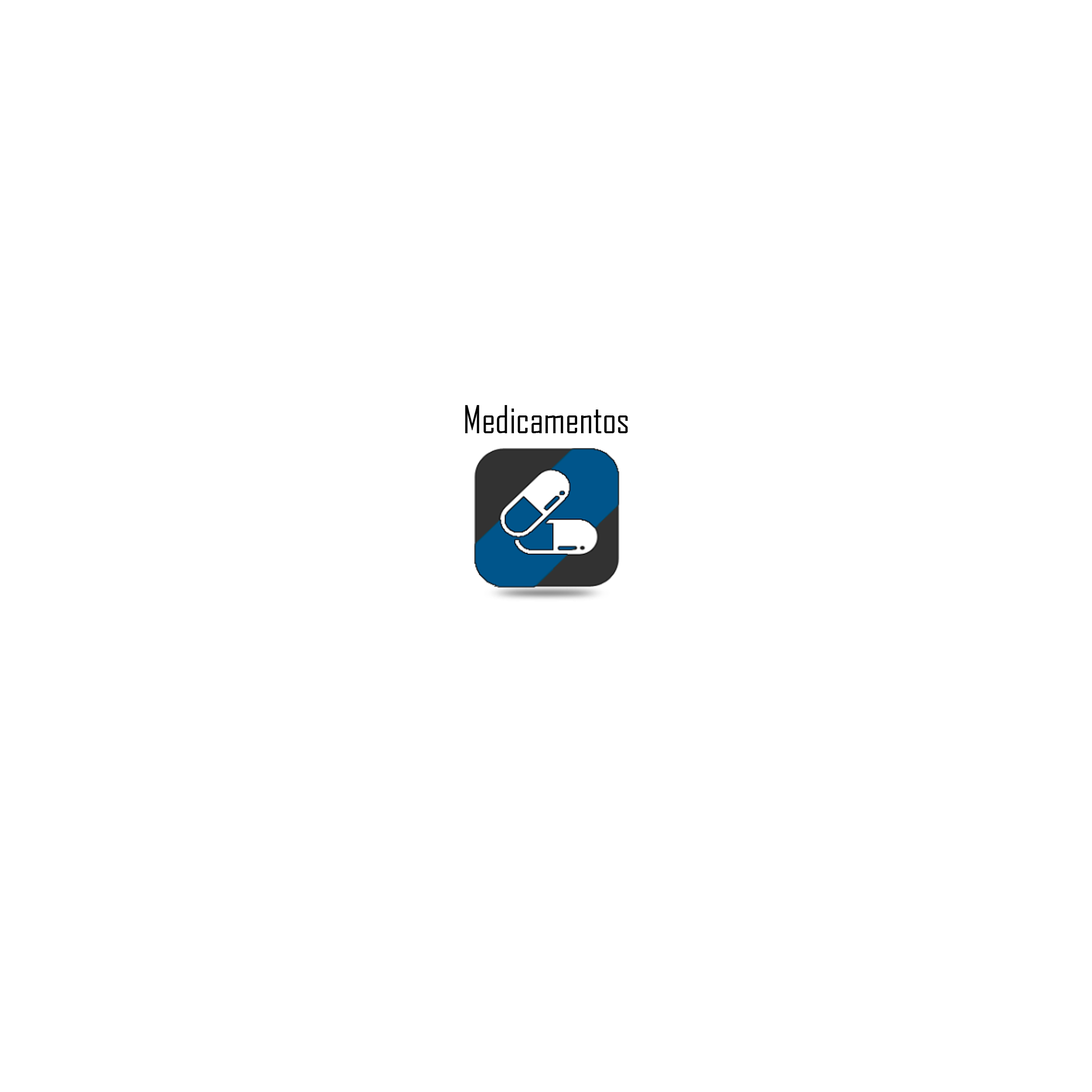
<style>
.page{position:relative;width:1092px;height:1092px;background:#ffffff}
.page>*{position:absolute;margin:0}
.t1{font:37.1px "AgencyFB-Reg";color:#030303}
</style>
<div class="page">
<p class="t1" style="left:465px;top:405px;width:163px;height:28px">Medicamentos</p>
</div>
